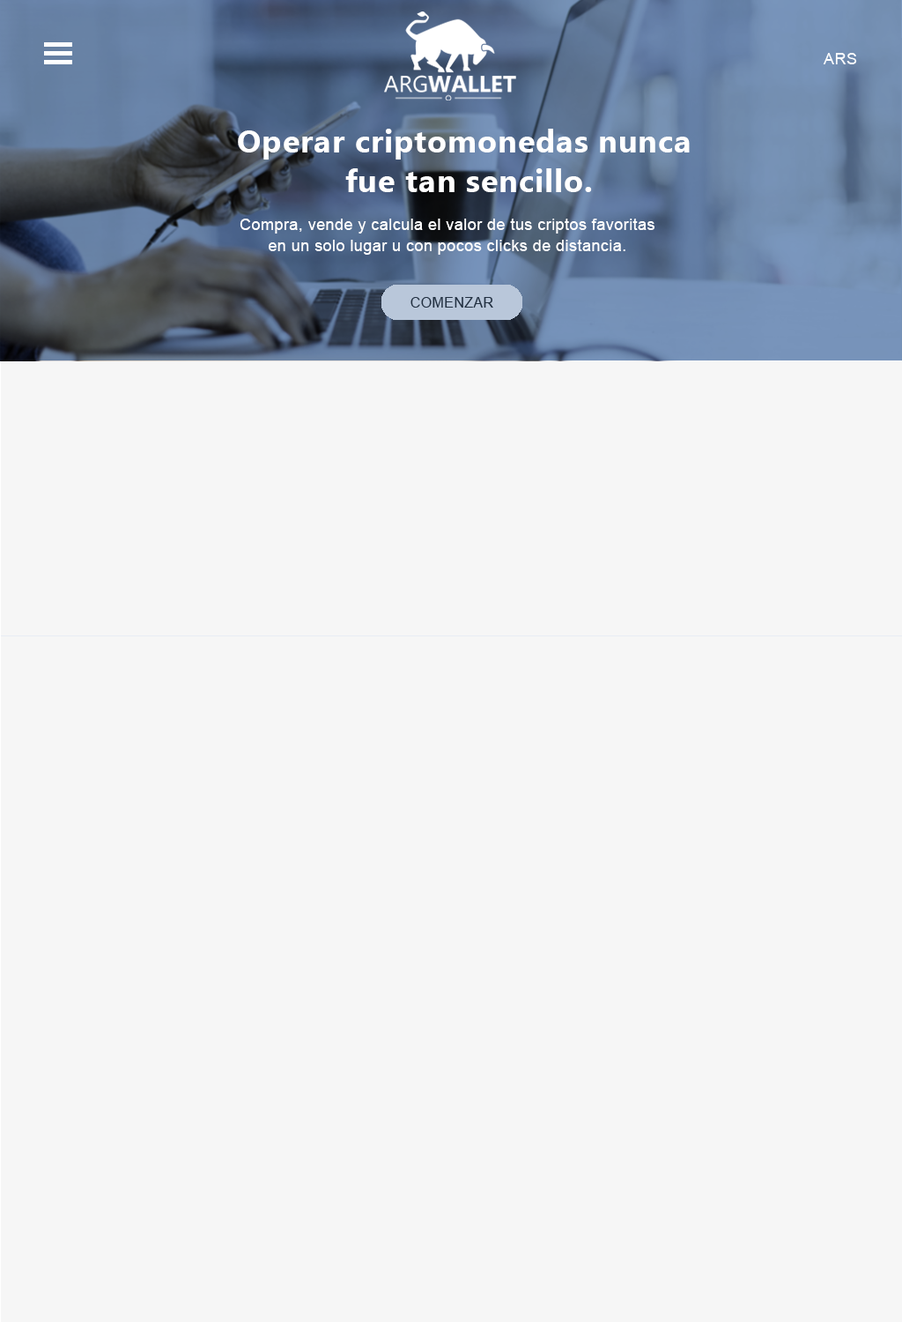
<style>
.page{position:relative;width:902px;height:1322px;background:#f6f6f6}
.page>*{position:absolute;margin:0}
.t1{font:31.7px/39.6px "Ebrima-Bold";letter-spacing:0.025em;color:#ffffff}
.t2{font:15.9px/21.1px "ArialMT";letter-spacing:0.025em;color:#ffffff}
</style>
<div class="page">
<p class="t1" style="left:238px;top:129px;width:452px;height:63px;text-align:center">Operar criptomonedas nunca<br> fue tan sencillo.</p>
<p class="t2" style="left:240px;top:219px;width:415px;height:36px;text-align:center">Compra, vende y calcula el valor de tus criptos favoritas<br>en un solo lugar u con pocos clicks de distancia.</p>
</div>
